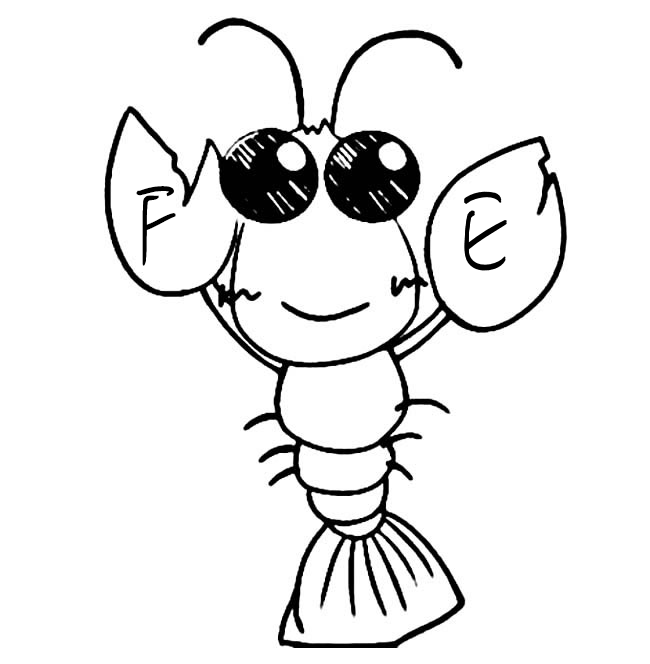
<style>
.page{position:relative;width:650px;height:664px;background:#ffffff}
.page>*{position:absolute;margin:0}
.t1{font:115px "MLingWaiMedium-SC";color:#000000}
</style>
<div class="page">
<p class="t1" style="left:136px;top:186px;width:40px;height:79px">Ｆ</p>
<p class="t1" style="left:136px;top:187px;width:40px;height:79px">Ｆ</p>
<p class="t1" style="left:464px;top:191px;width:43px;height:78px">E</p>
<p class="t1" style="left:464px;top:193px;width:43px;height:78px">E</p>
</div>
